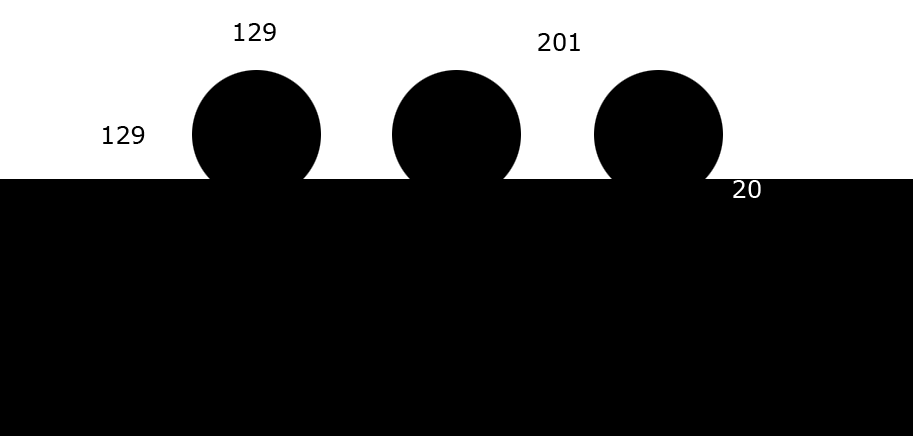
<style>
.page{position:relative;width:913px;height:436px;background:#000000}
.page>*{position:absolute;margin:0}
.t1{font:24px "Verdana";color:#000000}
.t2{font:24px "Verdana";color:#ffffff}
</style>
<div class="page">
<p class="t1" style="left:234px;top:23px;width:42px;height:18px">129</p>
<p class="t1" style="left:538px;top:33px;width:42px;height:18px">201</p>
<p class="t1" style="left:103px;top:126px;width:42px;height:18px">129</p>
<p class="t2" style="left:733px;top:180px;width:28px;height:18px">20</p>
</div>
